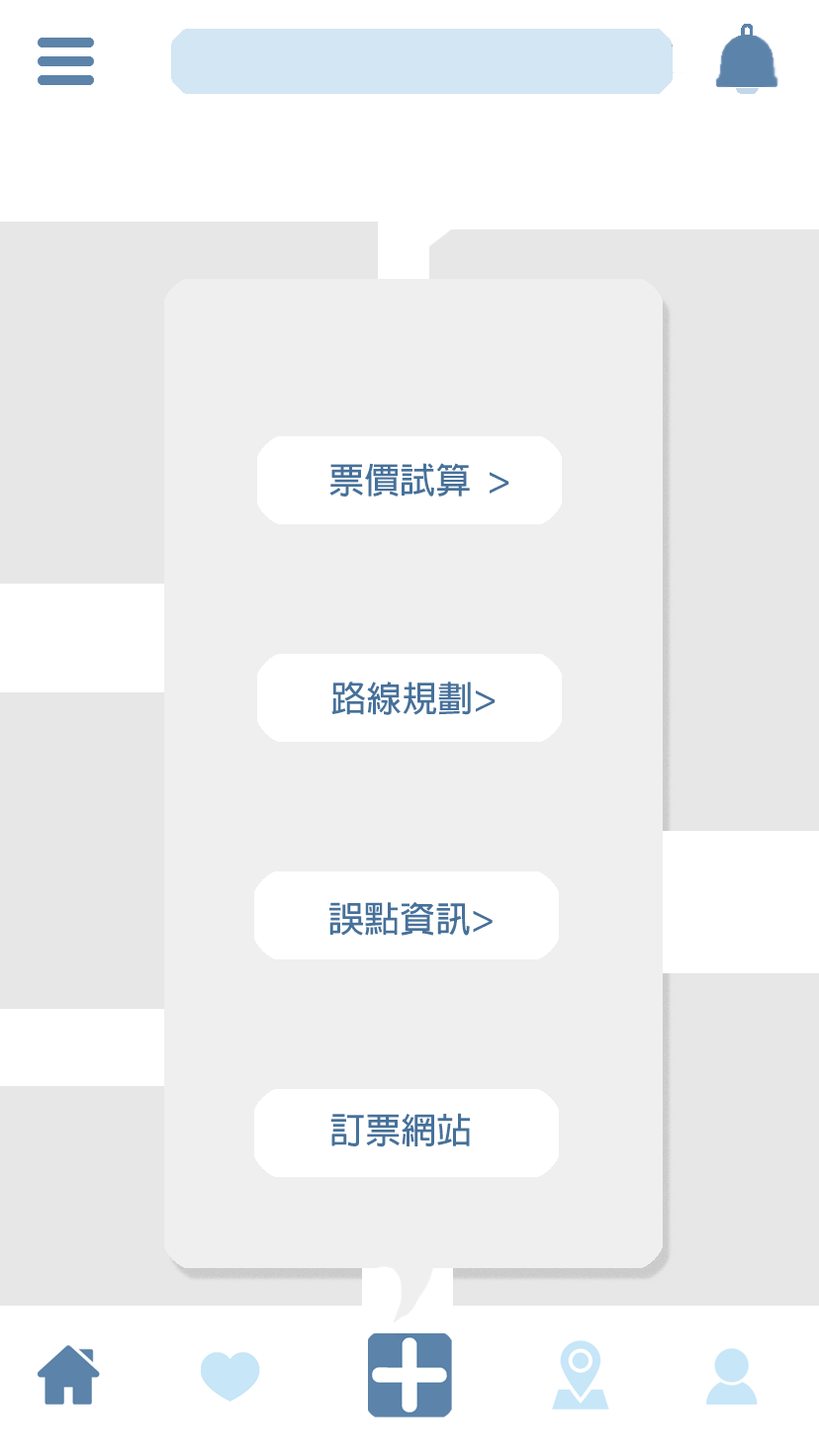
<style>
.page{position:relative;width:819px;height:1456px;background:#ffffff}
.page>*{position:absolute;margin:0}
.t1{font:35.6px "AdobeFanHeitiStd-Bold";color:#45719b}
</style>
<div class="page">
<p class="t1" style="left:329px;top:463px;width:180px;height:34px">票價試算  &gt;</p>
<p class="t1" style="left:331px;top:682px;width:165px;height:33px">路線規劃&gt;</p>
<p class="t1" style="left:329px;top:901px;width:164px;height:35px">誤點資訊&gt;</p>
<p class="t1" style="left:330px;top:1113px;width:140px;height:34px">訂票網站</p>
</div>
